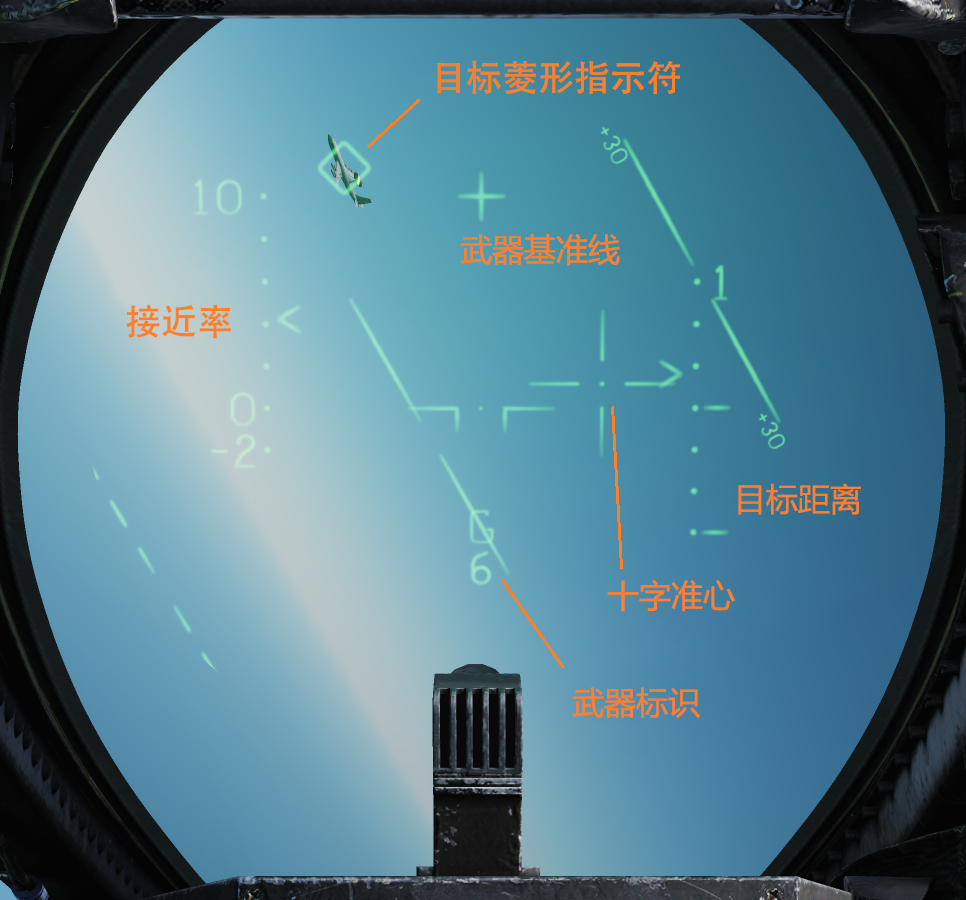
<style>
.page{position:relative;width:966px;height:900px}
.page>*{position:absolute;margin:0}
.t1{font:36px "AdobeHeitiStd-Regular";color:#ff7f27}
.t2{font:32px "MicrosoftYaHei";color:#ff7f2c}
</style>
<div class="page">
<p class="t1" style="left:437px;top:60px;width:243px;height:34px">目标菱形指示符</p>
<p class="t2" style="left:460px;top:234px;width:160px;height:32px">武器基准线</p>
<p class="t1" style="left:126px;top:304px;width:105px;height:35px">接近率</p>
<p class="t2" style="left:738px;top:483px;width:123px;height:32px">目标距离</p>
<p class="t2" style="left:607px;top:580px;width:128px;height:32px">十字准心</p>
<p class="t2" style="left:572px;top:687px;width:128px;height:31px">武器标识</p>
</div>
